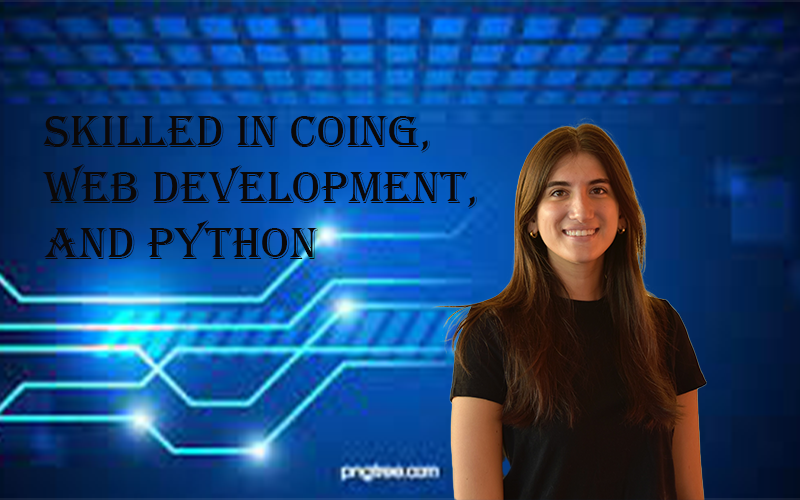
<style>
.page{position:relative;width:800px;height:500px}
.page>*{position:absolute;margin:0}
.t1{font:46.7px "Algerian";color:#0b0808}
</style>
<div class="page">
<p class="t1" style="left:42px;top:116px;width:435px;height:143px">Skilled in coing, web development, and python</p>
</div>
